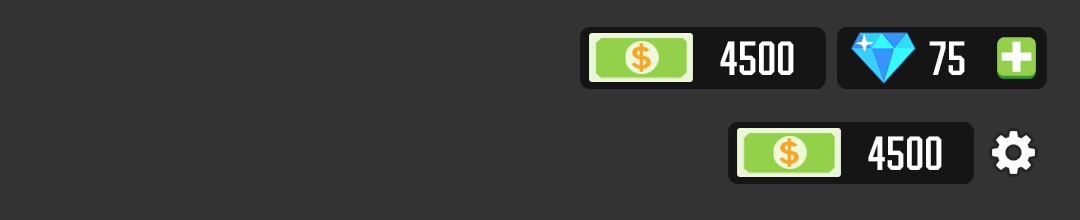
<style>
.page{position:relative;width:1080px;height:220px;background:#333333}
.page>*{position:absolute;margin:0}
.t1{font:48px "PinkSans-100";color:#ffffff}
.t2{font:92.4px "PinkSans-100";color:#ffffff}
</style>
<div class="page">
<p class="t1" style="left:720px;top:41px;width:74px;height:34px">4500</p>
<p class="t1" style="left:929px;top:41px;width:36px;height:34px">75</p>
<p class="t2" style="left:1001px;top:41px;width:31px;height:31px">+</p>
<p class="t1" style="left:868px;top:136px;width:74px;height:34px">4500</p>
</div>
